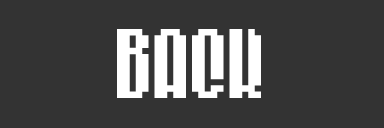
<style>
.page{position:relative;width:384px;height:128px;background:#333333}
.page>*{position:absolute;margin:0}
.t1{font:100px "PixelHigh";color:#ffffff}
</style>
<div class="page">
<p class="t1" style="left:117px;top:29px;width:144px;height:69px">BACK</p>
</div>
